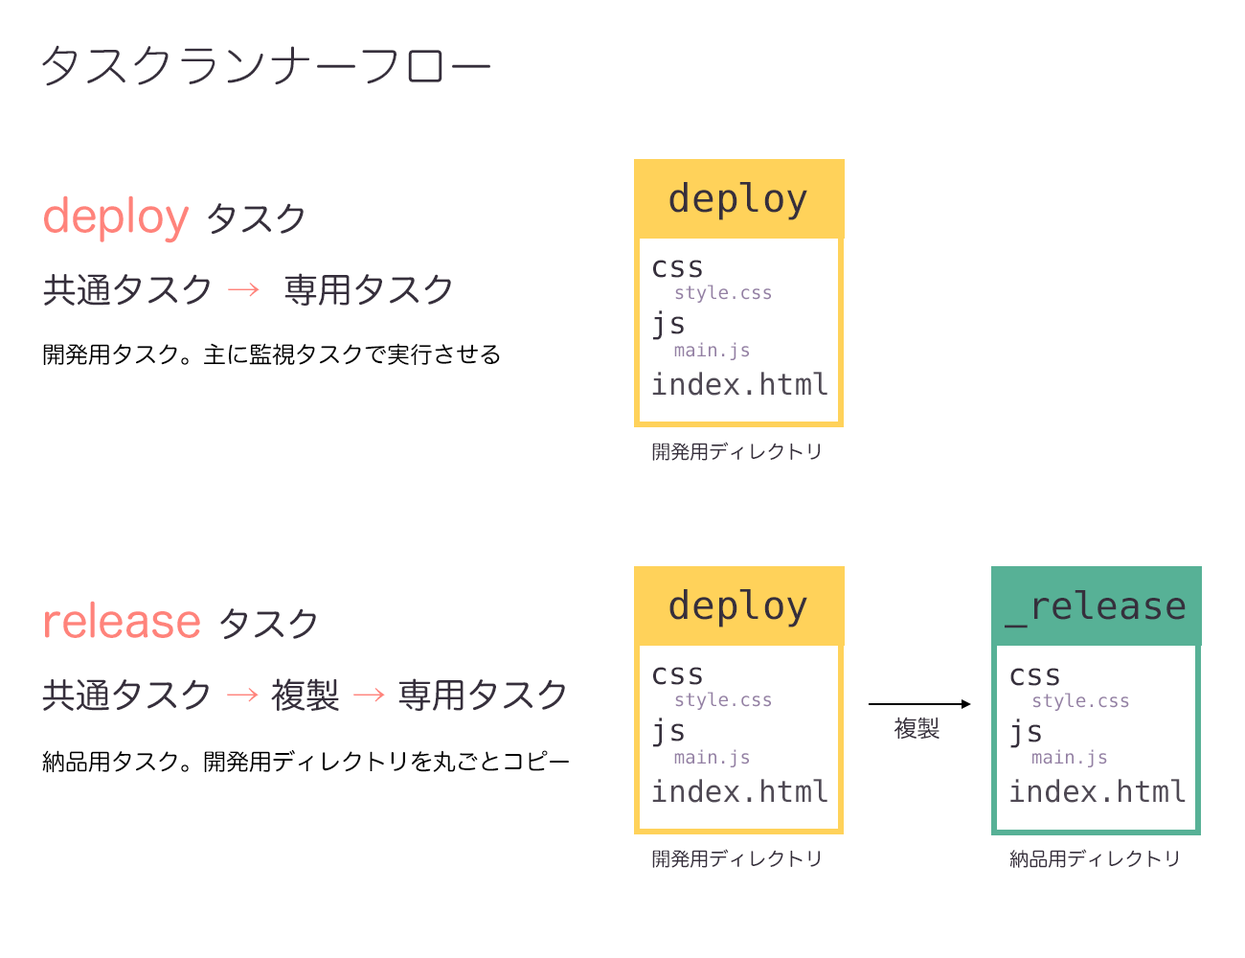
<style>
.page{position:relative;width:1245px;height:958px;background:#ffffff}
.page>*{position:absolute;margin:0}
.t1{font:46px "HiraMaruStd-W2";color:#362f3c}
.t2{font:39.1px "DejaVuSansMono";color:#362f3c}
.t3{font:34.5px/70.9px "HiraMaruStd-W4";color:#362f3c}
.t4{font:46px/70.9px "HiraMaruStd-W4";color:#ff837b}
.t5{font:34.5px/70.9px "HiraMaruStd-W4";color:#ff837b}
.t6{font:18.2px/22.1px "DejaVuSansMono";color:#9480a4}
.t7{font:29.8px/14.3px "DejaVuSansMono";color:#362f3c}
.t8{font:23px "HiraMaruStd-W4";color:#000000}
.t9{font:29.8px "DejaVuSansMono";color:#4f4954}
.t10{font:19.2px "HiraMaruStd-W4";color:#362f3c}
.t11{font:37.9px "DejaVuSansMono";color:#362f3c}
.t12{font:18.3px/22.2px "DejaVuSansMono";color:#9480a4}
.t13{font:29.9px/14.4px "DejaVuSansMono";color:#362f3c}
.t14{font:23px "HiraMaruStd-W4";color:#362f3c}
.t15{font:29.9px "DejaVuSansMono";color:#4f4954}
</style>
<div class="page">
<p class="t1" style="left:42px;top:45px;width:448px;height:41px">タスクランナーフロー</p>
<p class="t2" style="left:669px;top:182px;width:138px;height:38px">deploy</p>
<p class="t3" style="left:43px;top:195px;width:408px;height:111px"><span class="t4">deploy </span>タスク<br>共通タスク <span class="t5">→</span>  専用タスク</p>
<p class="t6" style="left:653px;top:260px;width:118px;height:43px"><span class="t7">css<br></span> style.css</p>
<p class="t6" style="left:653px;top:310px;width:96px;height:50px"><span class="t7">js<br></span> main.js</p>
<p class="t8" style="left:43px;top:343px;width:457px;height:22px">開発用タスク。主に監視タスクで実行させる</p>
<p class="t9" style="left:652px;top:372px;width:175px;height:24px">index.html</p>
<p class="t10" style="left:652px;top:442px;width:168px;height:19px">開発用ディレクトリ</p>
<p class="t2" style="left:669px;top:589px;width:138px;height:38px">deploy</p>
<p class="t11" style="left:1005px;top:590px;width:181px;height:38px">_release</p>
<p class="t3" style="left:42px;top:600px;width:523px;height:111px"><span class="t4">release </span>タスク<br>共通タスク <span class="t5">→</span> 複製 <span class="t5">→</span> 専用タスク</p>
<p class="t6" style="left:653px;top:667px;width:118px;height:43px"><span class="t7">css<br></span> style.css</p>
<p class="t12" style="left:1010px;top:668px;width:119px;height:43px"><span class="t13">css<br></span> style.css</p>
<p class="t6" style="left:653px;top:717px;width:96px;height:50px"><span class="t7">js<br></span> main.js</p>
<p class="t14" style="left:894px;top:716px;width:46px;height:23px">複製</p>
<p class="t12" style="left:1010px;top:718px;width:97px;height:49px"><span class="t13">js<br></span> main.js</p>
<p class="t8" style="left:42px;top:750px;width:527px;height:23px">納品用タスク。開発用ディレクトリを丸ごとコピー</p>
<p class="t9" style="left:652px;top:779px;width:175px;height:24px">index.html</p>
<p class="t15" style="left:1010px;top:779px;width:176px;height:24px">index.html</p>
<p class="t10" style="left:652px;top:849px;width:168px;height:19px">開発用ディレクトリ</p>
<p class="t10" style="left:1009px;top:849px;width:169px;height:19px">納品用ディレクトリ</p>
</div>
